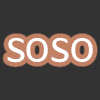
<style>
.page{position:relative;width:100px;height:100px;background:#333333}
.page>*{position:absolute;margin:0}
.t1{font:42px "NanumBarunGothic";color:#ffffff}
</style>
<div class="page">
<p class="t1" style="left:7px;top:38px;width:86px;height:25px">soso</p>
</div>
